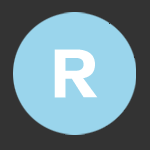
<style>
.page{position:relative;width:150px;height:150px;background:#333333}
.page>*{position:absolute;margin:0}
.t1{font:55.8px "FZLTTHB--B51-0";color:#ffffff}
</style>
<div class="page">
<p class="t1" style="left:54px;top:49px;width:44px;height:49px">R</p>
</div>
